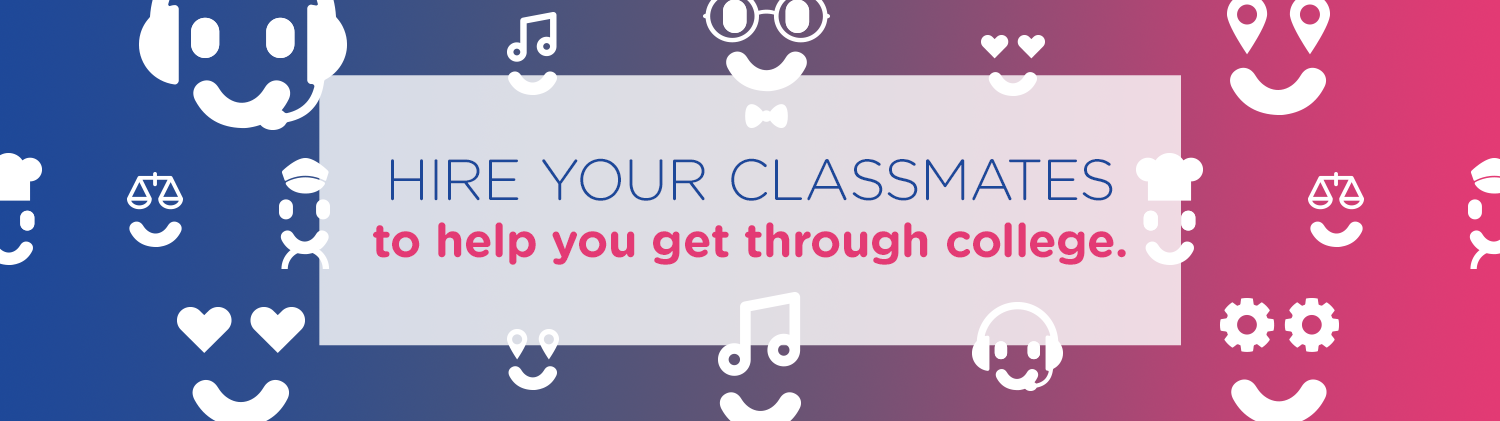
<style>
.page{position:relative;width:1500px;height:421px}
.page>*{position:absolute;margin:0}
.t1{font:47px/57px "GothamRounded-Bold";color:#e33a74}
.t2{font:57.8px/57px "GothamRounded-Light";color:#1d4899;text-transform:uppercase}
</style>
<div class="page">
<p class="t1" style="left:373px;top:158px;width:753px;height:107px;text-align:center"><span class="t2">hire your classmates<br></span>to help you get through college.</p>
</div>
